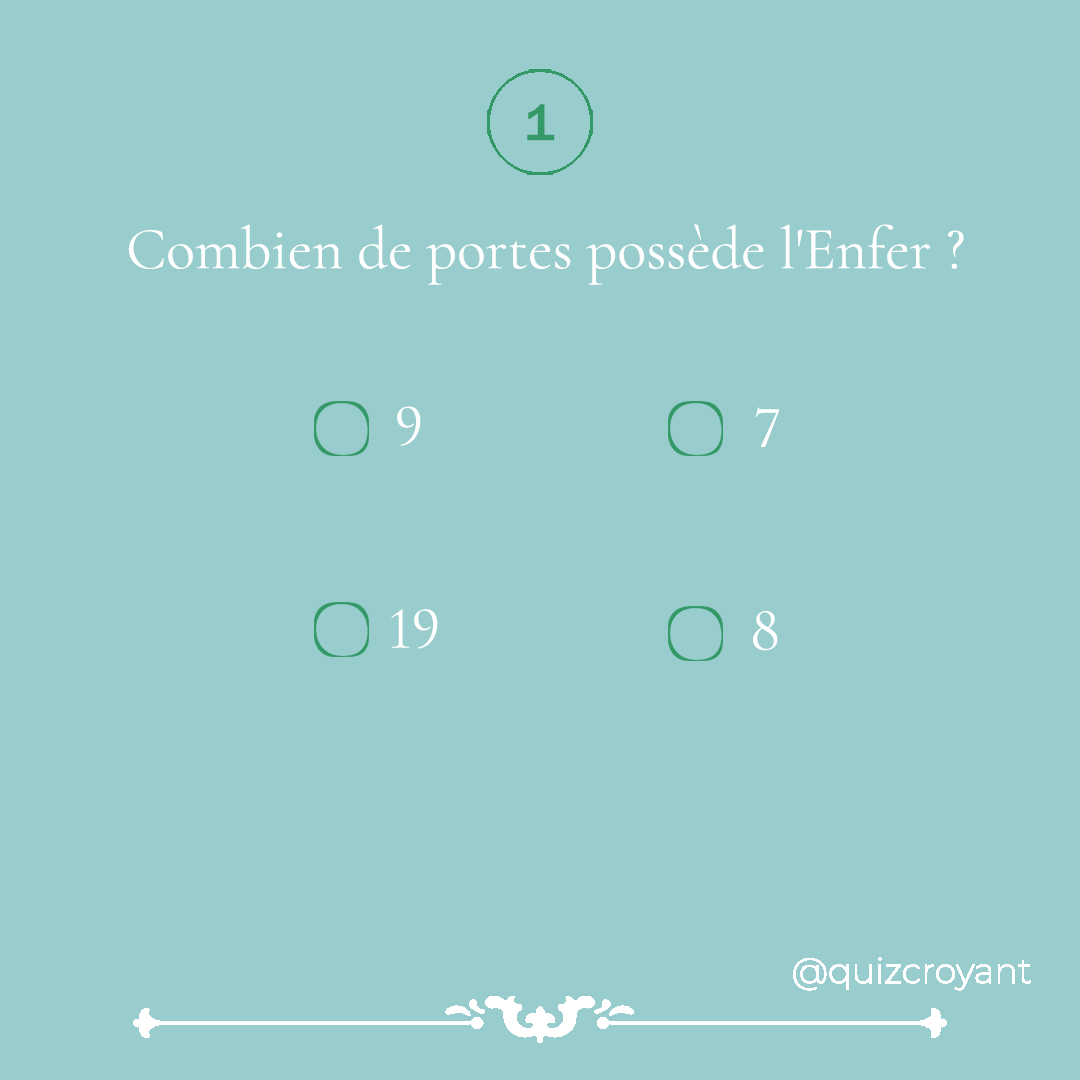
<style>
.page{position:relative;width:1080px;height:1080px;background:#99cccc}
.page>*{position:absolute;margin:0}
.t1{font:52.5px "FranklinGothic-Medium";color:#339966}
.t2{font:60px "CormorantInfant-Regular";color:#ffffff}
.t3{font:60px "CormorantInfant-Regular";color:#ffffff;scale:1.04 1}
</style>
<div class="page">
<p class="t1" style="left:527px;top:104px;width:28px;height:37px">1</p>
<p class="t2" style="left:128px;top:224px;width:836px;height:61px">Combien de portes possède l'Enfer ?</p>
<p class="t2" style="left:397px;top:406px;width:24px;height:40px">9</p>
<p class="t3" style="left:756px;top:407px;width:24px;height:40px">7</p>
<p class="t2" style="left:391px;top:609px;width:47px;height:40px">19</p>
<p class="t2" style="left:753px;top:611px;width:25px;height:40px">8</p>
</div>
